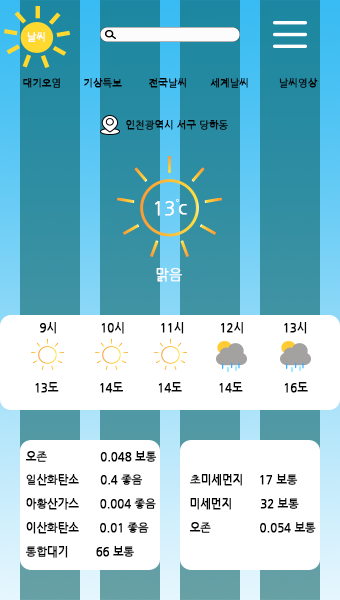
<style>
.page{position:relative;width:340px;height:600px;background:#ffffff}
.page>*{position:absolute;margin:0}
.t1{font:10px "NanumGothic";color:#fcfcfc;font-weight:bold}
.t2{font:10px "NanumGothic";color:#060606;font-weight:bold}
.t3{font:18px "NanumGothic";color:#fefefe;font-weight:bold}
.t4{font:18px "NanumGothic";color:#fcfcfc;font-weight:bold}
.t5{font:14px "NanumGothic";color:#fcfcfc;font-weight:bold}
.t6{font:11px "NanumGothic";color:#050505;font-weight:bold}
</style>
<div class="page">
<p class="t1" style="left:27px;top:32px;width:18px;height:10px">날씨</p>
<p class="t2" style="left:23px;top:78px;width:37px;height:10px">대기오염</p>
<p class="t2" style="left:84px;top:78px;width:38px;height:10px">기상특보</p>
<p class="t2" style="left:149px;top:78px;width:37px;height:10px">전국날씨</p>
<p class="t2" style="left:210px;top:78px;width:38px;height:10px">세계날씨</p>
<p class="t2" style="left:279px;top:78px;width:39px;height:10px">날씨영상</p>
<p class="t2" style="left:126px;top:120px;width:102px;height:10px">인천광역시 서구 당하동</p>
<p class="t3" style="left:155px;top:201px;width:19px;height:15px">13</p>
<p class="t4" style="left:178px;top:204px;width:9px;height:11px">c</p>
<p class="t5" style="left:156px;top:267px;width:26px;height:15px">맑음</p>
<p class="t6" style="left:40px;top:322px;width:16px;height:12px">9시</p>
<p class="t6" style="left:101px;top:322px;width:23px;height:12px">10시</p>
<p class="t6" style="left:161px;top:322px;width:23px;height:12px">11시</p>
<p class="t6" style="left:221px;top:322px;width:22px;height:12px">12시</p>
<p class="t6" style="left:284px;top:322px;width:23px;height:12px">13시</p>
<p class="t6" style="left:35px;top:382px;width:24px;height:11px">13도</p>
<p class="t6" style="left:100px;top:382px;width:23px;height:11px">14도</p>
<p class="t6" style="left:158px;top:382px;width:24px;height:11px">14도</p>
<p class="t6" style="left:219px;top:382px;width:24px;height:11px">14도</p>
<p class="t6" style="left:284px;top:382px;width:24px;height:11px">16도</p>
<p class="t6" style="left:26px;top:451px;width:21px;height:11px">오존</p>
<p class="t6" style="left:100px;top:451px;width:57px;height:11px">0.048 보통</p>
<p class="t6" style="left:26px;top:474px;width:53px;height:12px">일산화탄소</p>
<p class="t6" style="left:100px;top:474px;width:43px;height:11px">0.4 좋음</p>
<p class="t6" style="left:190px;top:474px;width:52px;height:12px">초미세먼지</p>
<p class="t6" style="left:260px;top:474px;width:38px;height:11px">17 보통</p>
<p class="t6" style="left:26px;top:498px;width:53px;height:12px">아황산가스</p>
<p class="t6" style="left:100px;top:498px;width:56px;height:11px">0.004 좋음</p>
<p class="t6" style="left:190px;top:498px;width:41px;height:12px">미세먼지</p>
<p class="t6" style="left:260px;top:498px;width:39px;height:11px">32 보통</p>
<p class="t6" style="left:26px;top:522px;width:53px;height:12px">이산화탄소</p>
<p class="t6" style="left:100px;top:522px;width:49px;height:11px">0.01 좋음</p>
<p class="t6" style="left:190px;top:522px;width:21px;height:11px">오존</p>
<p class="t6" style="left:260px;top:522px;width:56px;height:11px">0.054 보통</p>
<p class="t6" style="left:25px;top:546px;width:43px;height:12px">통합대기</p>
<p class="t6" style="left:96px;top:546px;width:38px;height:11px">66 보통</p>
</div>
